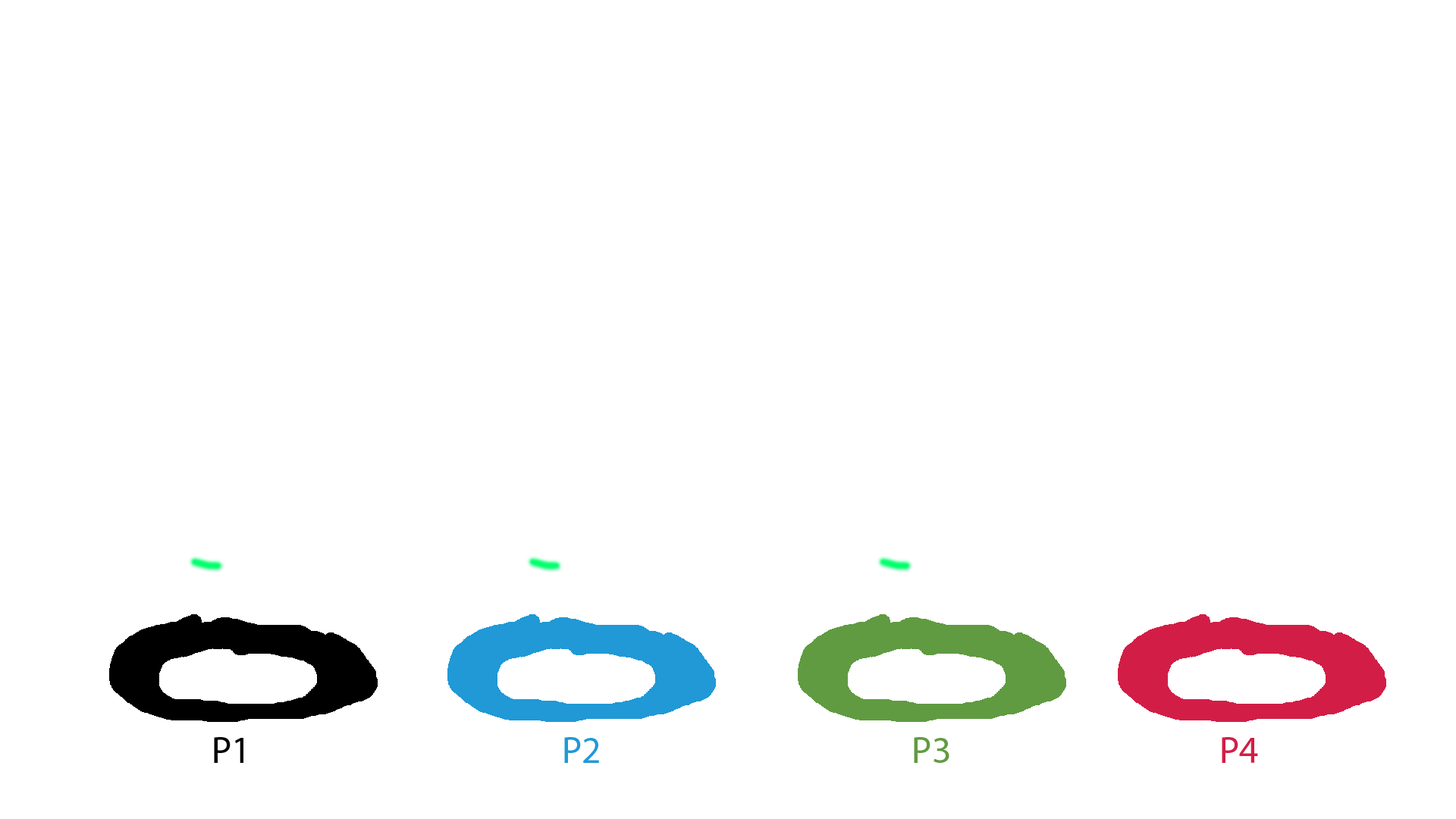
<style>
.page{position:relative;width:1456px;height:819px;background:#ffffff}
.page>*{position:absolute;margin:0}
.t1{font:9.1px "MyriadHebrew-Regular";color:#000000}
.t2{font:9.1px "MyriadHebrew-Regular";color:#2099d6}
.t3{font:9.1px "MyriadHebrew-Regular";color:#609b42}
.t4{font:9.1px "MyriadHebrew-Regular";color:#d21e47}
</style>
<div class="page">
<p class="t1" style="left:214px;top:737px;width:29px;height:26px">P1</p>
<p class="t2" style="left:564px;top:737px;width:35px;height:26px">P2</p>
<p class="t3" style="left:914px;top:737px;width:35px;height:26px">P3</p>
<p class="t4" style="left:1222px;top:737px;width:36px;height:26px">P4</p>
</div>
